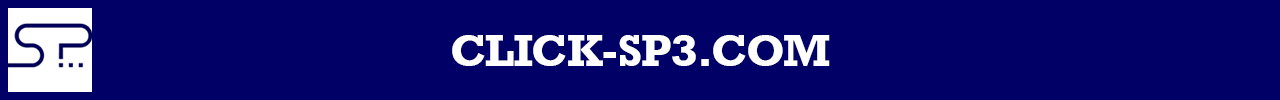
<style>
.page{position:relative;width:1280px;height:100px;background:#000066}
.page>*{position:absolute;margin:0}
.t1{font:41.7px "Rockwell-Bold";color:#ffffff;text-transform:uppercase}
</style>
<div class="page">
<p class="t1" style="left:452px;top:35px;width:378px;height:31px">Click-Sp3.com</p>
</div>
